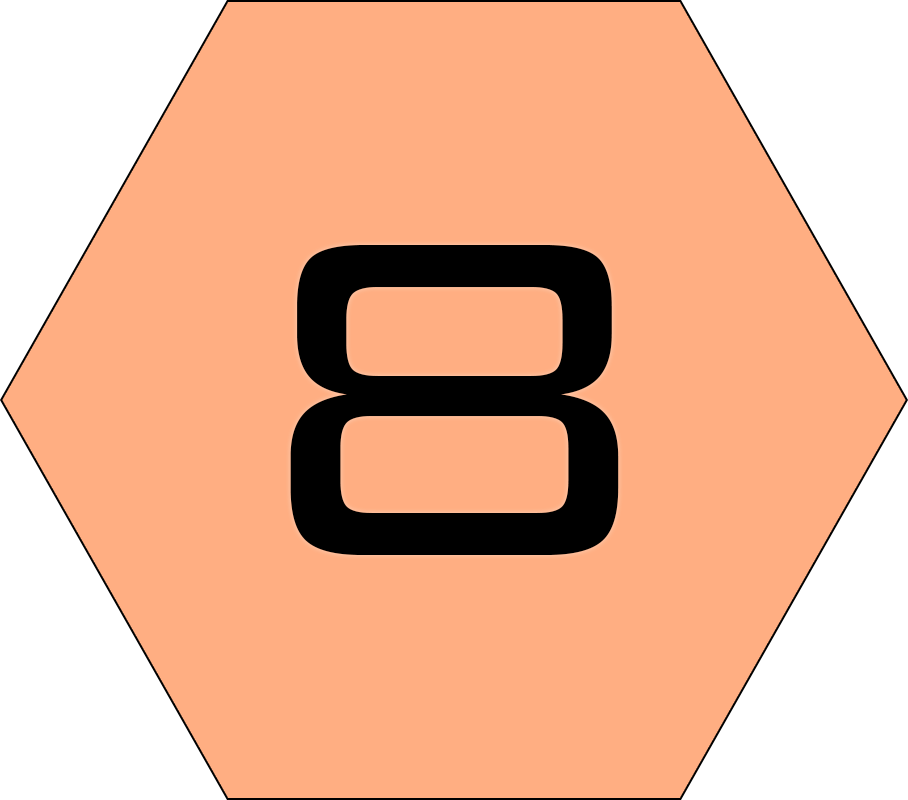
<style>
.page{position:relative;width:908px;height:800px;background:#ffae82}
.page>*{position:absolute;margin:0}
.t1{font:600px "BankGothicBT-Light";color:#000000}
</style>
<div class="page">
<p class="t1" style="left:290px;top:245px;width:329px;height:310px">8</p>
</div>
